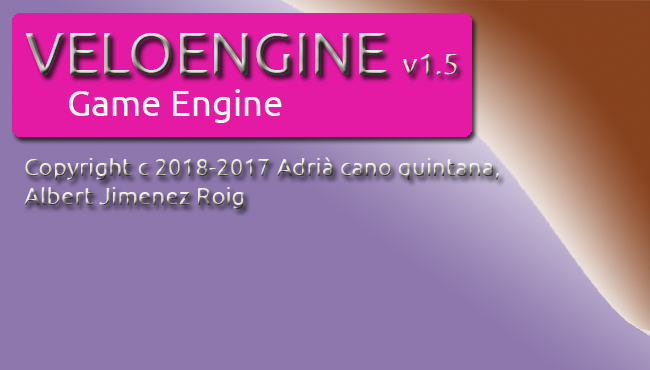
<style>
.page{position:relative;width:650px;height:370px}
.page>*{position:absolute;margin:0}
.t1{font:60px "Ubuntu-Regular"}
.t2{font:30px "Ubuntu-Regular"}
.t3{font:36px "Ubuntu-Regular";color:#f8f8f8}
.t4{font:24px "Ubuntu-Regular"}
</style>
<div class="page">
<p class="t1" style="left:25px;top:33px;width:433px;height:42px">VELOENGINE <span class="t2">v1.5</span></p>
<p class="t3" style="left:69px;top:89px;width:213px;height:34px">Game Engine</p>
<p class="t4" style="left:24px;top:157px;width:475px;height:52px">Copyright c 2018-2017 Adrià cano quintana,<br>Albert Jimenez Roig</p>
</div>
